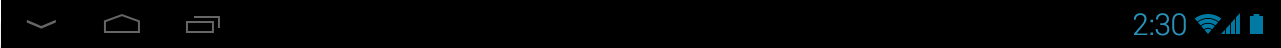
<style>
.page{position:relative;width:1281px;height:48px;background:#000000}
.page>*{position:absolute;margin:0}
.t1{font:30px "Roboto-Light";color:#2991b7}
</style>
<div class="page">
<p class="t1" style="left:1134px;top:13px;width:52px;height:23px">2:30</p>
</div>
